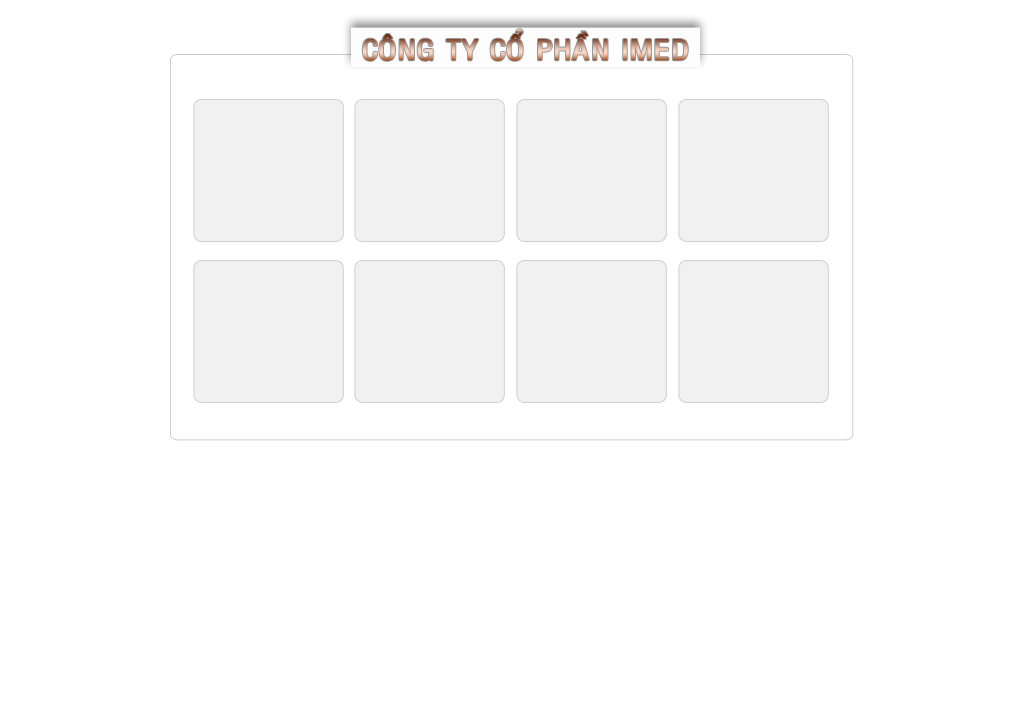
<style>
.page{position:relative;width:1024px;height:720px;background:#ffffff}
.page>*{position:absolute;margin:0}
.t1{font:27.1px "VNI-Helve-Condense";letter-spacing:-0.005em;font-weight:bold;scale:1.08 1}
</style>
<div class="page">
<p class="t1" style="left:362px;top:29px;width:326px;height:32px">COÂNG TY COÅ PHAÀN IMED</p>
</div>
